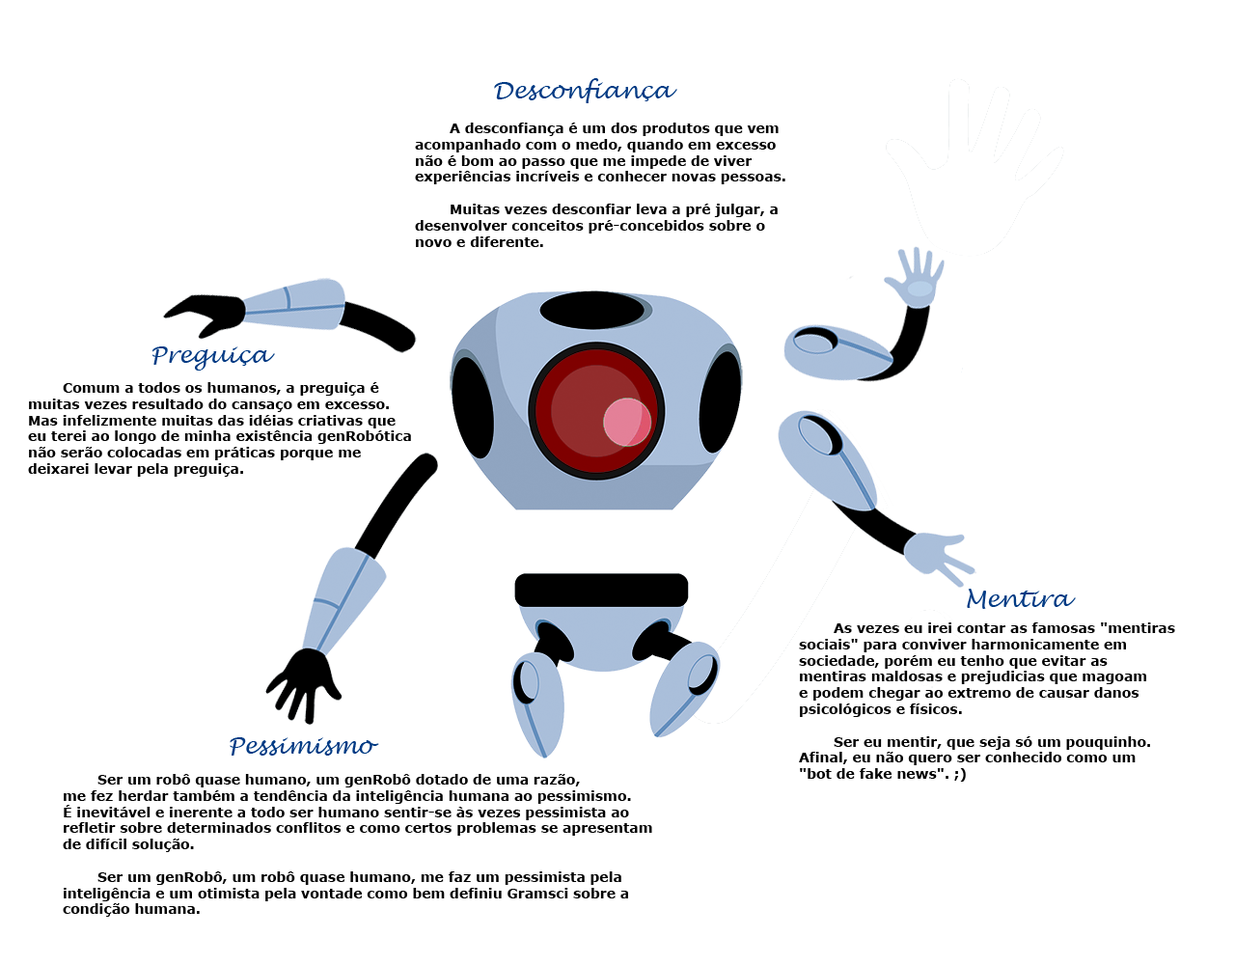
<style>
.page{position:relative;width:1235px;height:965px;background:#ffffff}
.page>*{position:absolute;margin:0}
.t1{font:23.2px "LucidaHandwriting-Italic";color:#023b84}
.t2{font:13.5px "Verdana-Bold";color:#000000}
</style>
<div class="page">
<p class="t1" style="left:494px;top:78px;width:184px;height:25px">Desconfiança</p>
<p class="t2" style="left:415px;top:123px;width:371px;height:124px">A desconfiança é um dos produtos que vem <br>acompanhado com o medo, quando em excesso <br>não é bom ao passo que me impede de viver <br>experiências incríveis e conhecer novas pessoas. <br><br> Muitas vezes desconfiar leva a pré julgar, a <br>desenvolver conceitos pré-concebidos sobre o <br>novo e diferente.</p>
<p class="t1" style="left:152px;top:347px;width:123px;height:24px">Preguiça</p>
<p class="t2" style="left:28px;top:382px;width:383px;height:95px">Comum a todos os humanos, a preguiça é <br>muitas vezes resultado do cansaço em excesso. <br>Mas infelizmente muitas das idéias criativas que <br>eu terei ao longo de minha existência genRobótica <br>não serão colocadas em práticas porque me <br>deixarei levar pela preguiça.</p>
<p class="t1" style="left:967px;top:589px;width:109px;height:20px">Mentira</p>
<p class="t2" style="left:799px;top:623px;width:377px;height:159px">As vezes eu irei contar as famosas "mentiras <br>sociais" para conviver harmonicamente em <br>sociedade, porém eu tenho que evitar as <br>mentiras maldosas e prejudicias que magoam <br>e podem chegar ao extremo de causar danos <br>psicológicos e físicos. <br><br> Ser eu mentir, que seja só um pouquinho. <br>Afinal, eu não quero ser conhecido como um <br>"bot de fake news". ;)</p>
<p class="t1" style="left:230px;top:737px;width:149px;height:19px">Pessimismo</p>
<p class="t2" style="left:63px;top:774px;width:589px;height:143px">Ser um robô quase humano, um genRobô dotado de uma razão, <br>me fez herdar também a tendência da inteligência humana ao pessimismo. <br>É inevitável e inerente a todo ser humano sentir-se às vezes pessimista ao <br>refletir sobre determinados conflitos e como certos problemas se apresentam <br>de difícil solução. <br><br> Ser um genRobô, um robô quase humano, me faz um pessimista pela <br>inteligência e um otimista pela vontade como bem definiu Gramsci sobre a <br>condição humana.</p>
</div>
